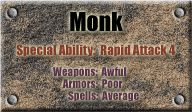
<style>
.page{position:relative;width:192px;height:112px}
.page>*{position:absolute;margin:0}
.t1{font:24px "Impact";color:#000000}
.t2{font:13px "Impact";color:#853c2f}
.t3{font:11px "Impact";color:#59334e}
</style>
<div class="page">
<p class="t1" style="left:70px;top:12px;width:53px;height:20px">Monk</p>
<p class="t2" style="left:16px;top:44px;width:160px;height:13px">Special Ability:  Rapid Attack 4</p>
<p class="t3" style="left:53px;top:67px;width:73px;height:10px">Weapons:  Awful</p>
<p class="t3" style="left:62px;top:79px;width:61px;height:9px">Armors:  Poor</p>
<p class="t3" style="left:68px;top:91px;width:71px;height:11px">Spells:  Average</p>
</div>
